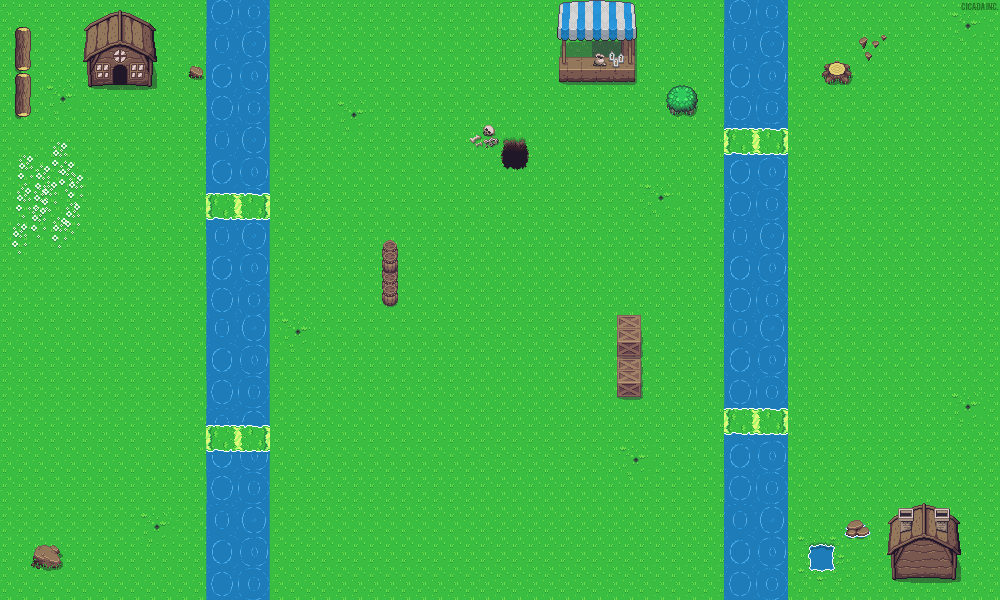
<style>
.page{position:relative;width:1000px;height:600px;background:#3abe41}
.page>*{position:absolute;margin:0}
.t1{font:8px "Bebas";color:#217826}
</style>
<div class="page">
<p class="t1" style="left:961px;top:3px;width:38px;height:7px">Cicada Inc.</p>
</div>
